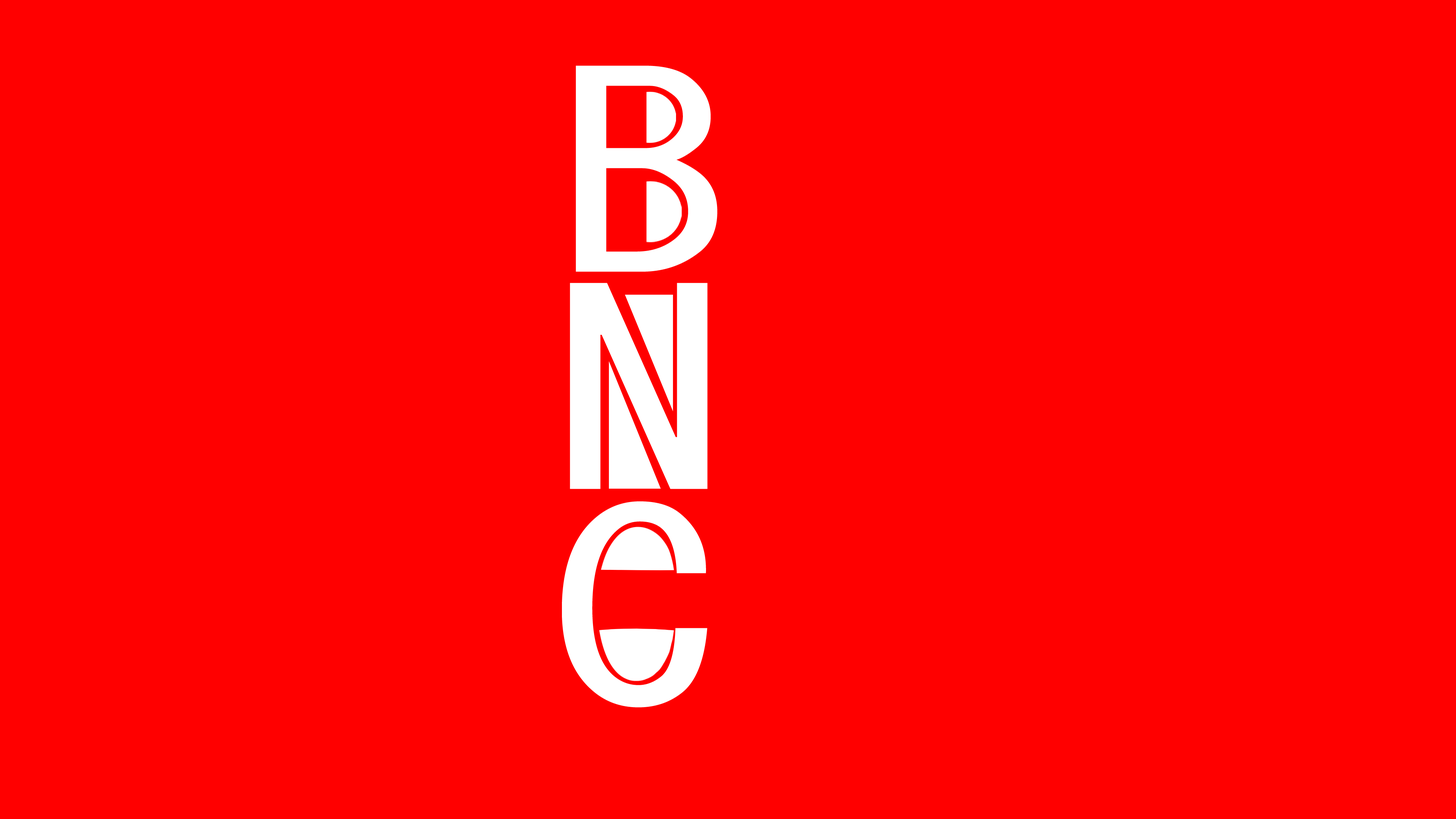
<style>
.page{position:relative;width:1456px;height:819px;background:#ff0000}
.page>*{position:absolute;margin:0}
.t1{font:270.5px "MS-Gothic";letter-spacing:-0.04em;color:#ffffff;scale:1.25 1}
.t2{font:270.5px "MS-Gothic";letter-spacing:0.02em;color:#ffffff;scale:1.25 1}
</style>
<div class="page">
<p class="t1" style="left:576px;top:66px;width:141px;height:206px">B</p>
<p class="t2" style="left:570px;top:283px;width:138px;height:206px">N</p>
<p class="t1" style="left:562px;top:501px;width:146px;height:207px">C</p>
</div>
